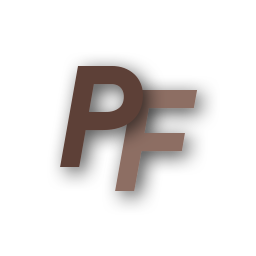
<style>
.page{position:relative;width:256px;height:256px;background:#ffffff}
.page>*{position:absolute;margin:0}
.t1{font:141px "ProductSans-BoldItalic";letter-spacing:-0.22em;color:#5d4037}
.t2{font:141px "ProductSans-BoldItalic";letter-spacing:-0.22em;color:#8d6e63}
</style>
<div class="page">
<p class="t1" style="left:60px;top:66px;width:83px;height:101px">P</p>
<p class="t2" style="left:115px;top:90px;width:83px;height:101px">F</p>
</div>
